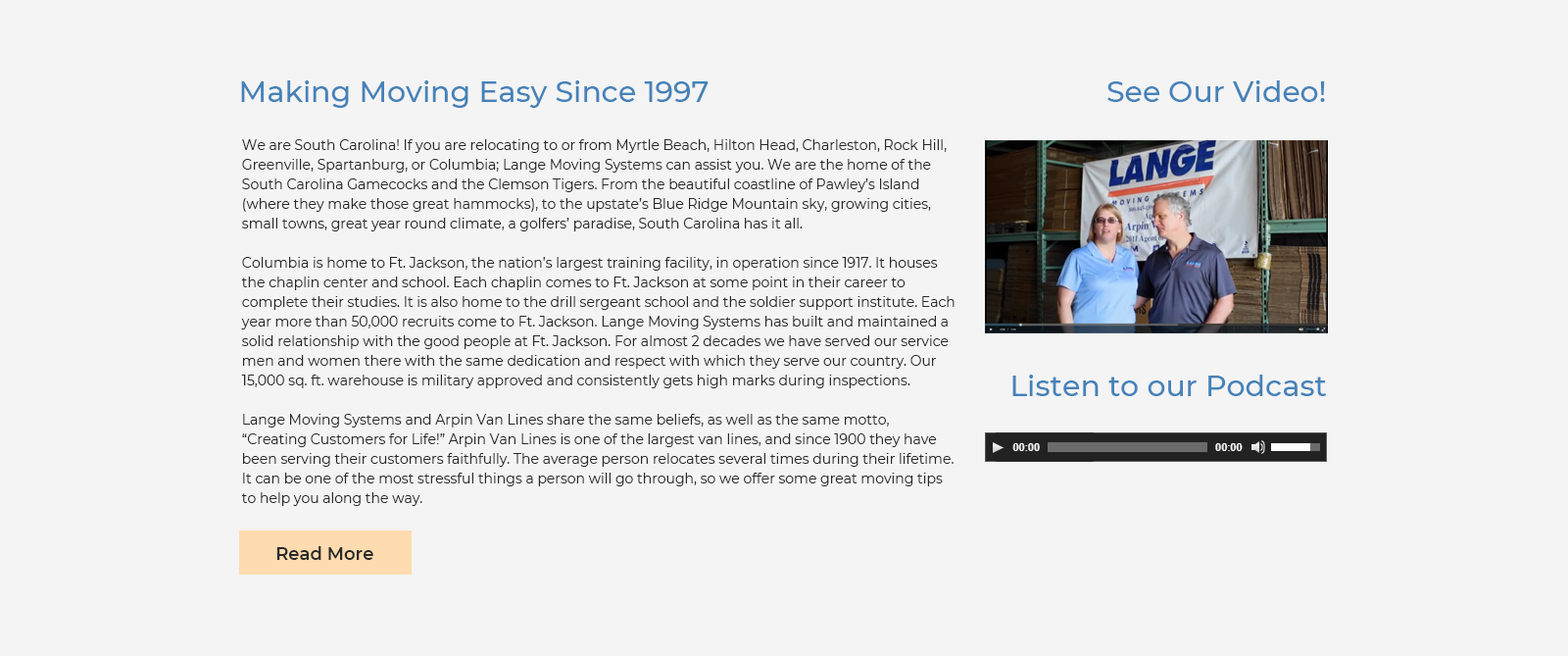
<style>
.page{position:relative;width:1568px;height:656px;background:#f4f4f4}
.page>*{position:absolute;margin:0}
.t1{font:29.4px "Montserrat-Medium";color:#4582b9}
.t2{font:13.7px/19.6px "Montserrat-Regular";color:#292929}
.t3{font:17.6px "Montserrat-SemiBold";color:#292929}
</style>
<div class="page">
<p class="t1" style="left:241px;top:80px;width:468px;height:28px">Making Moving Easy Since 1997</p>
<p class="t1" style="left:1107px;top:80px;width:218px;height:22px">See Our Video!</p>
<p class="t2" style="left:241px;top:139px;width:714px;height:367px">We are South Carolina! If you are relocating to or from Myrtle Beach, Hilton Head, Charleston, Rock Hill, Greenville, Spartanburg, or Columbia; Lange Moving Systems can assist you. We are the home of the South Carolina Gamecocks and the Clemson Tigers. From the beautiful coastline of Pawley’s Island (where they make those great hammocks), to the upstate’s Blue Ridge Mountain sky, growing cities, small towns, great year round climate, a golfers’ paradise, South Carolina has it all.<br><br>Columbia is home to Ft. Jackson, the nation’s largest training facility, in operation since 1917. It houses the chaplin center and school. Each chaplin comes to Ft. Jackson at some point in their career to complete their studies. It is also home to the drill sergeant school and the soldier support institute. Each year more than 50,000 recruits come to Ft. Jackson. Lange Moving Systems has built and maintained a solid relationship with the good people at Ft. Jackson. For almost 2 decades we have served our service men and women there with the same dedication and respect with which they serve our country. Our 15,000 sq. ft. warehouse is military approved and consistently gets high marks during inspections.<br><br>Lange Moving Systems and Arpin Van Lines share the same beliefs, as well as the same motto, “Creating Customers for Life!” Arpin Van Lines is one of the largest van lines, and since 1900 they have been serving their customers faithfully. The average person relocates several times during their lifetime. It can be one of the most stressful things a person will go through, so we offer some great moving tips to help you along the way.</p>
<p class="t1" style="left:1012px;top:374px;width:315px;height:22px">Listen to our Podcast</p>
<p class="t3" style="left:276px;top:546px;width:97px;height:14px">Read More</p>
</div>
